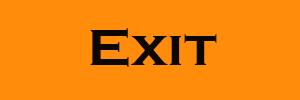
<style>
.page{position:relative;width:300px;height:100px;background:#ff8c0a}
.page>*{position:absolute;margin:0}
.t1{font:52.5px "CopperplateGothic-Bold";color:#0c0701;scale:1.1 1}
</style>
<div class="page">
<p class="t1" style="left:90px;top:28px;width:127px;height:39px">Exit</p>
</div>
